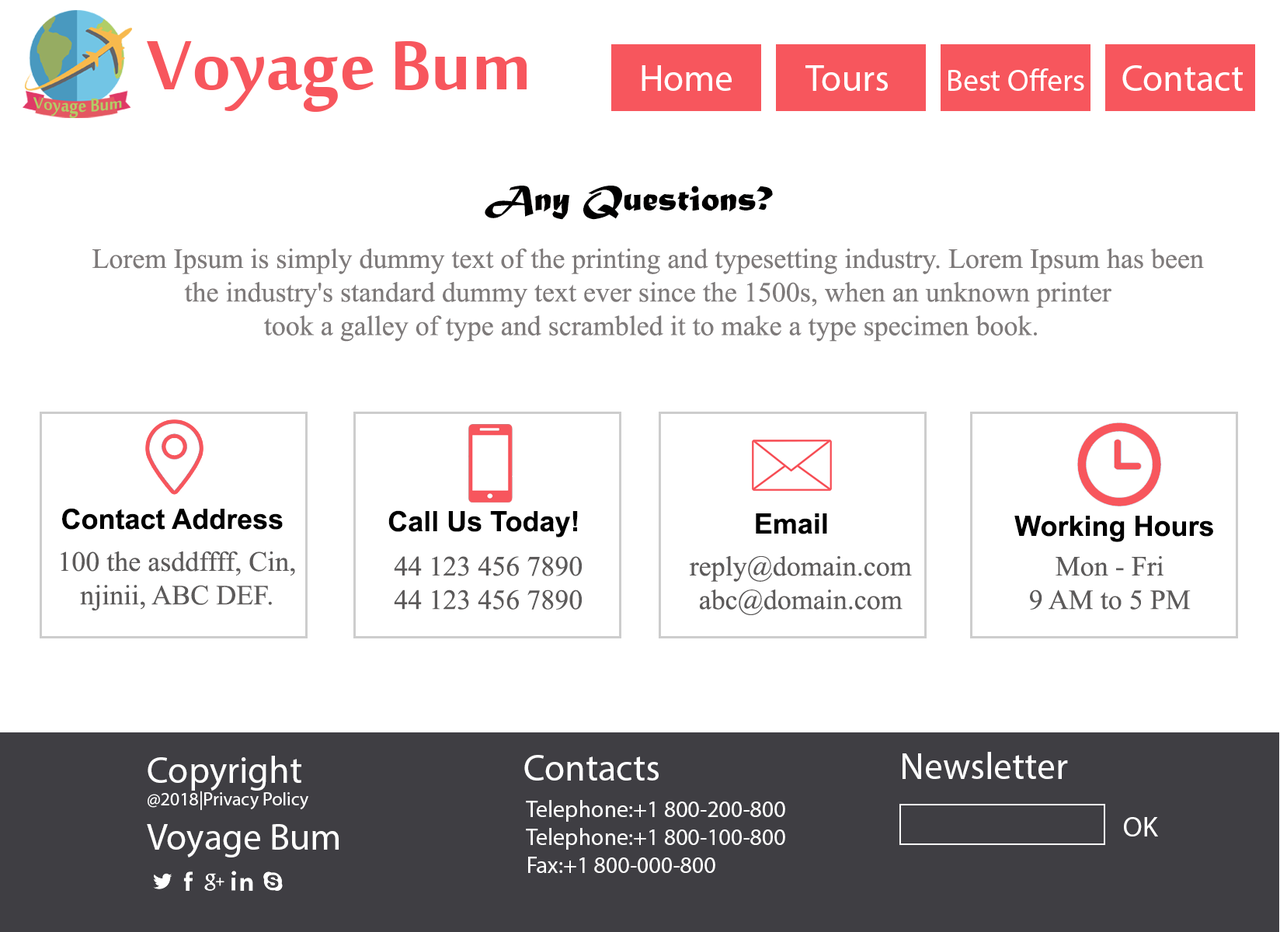
<style>
.page{position:relative;width:1280px;height:932px;background:#ffffff}
.page>*{position:absolute;margin:0}
.t1{font:107.1px "MoolBoran";color:#f7565d}
.t2{font:37.3px "MyriadPro-Regular";color:#ffffff}
.t3{font:31.1px "MyriadPro-Regular";color:#ffffff}
.t4{font:22.6px "MoolBoran";color:#b1cd66;scale:1.14 1}
.t5{font:37.3px "MaturaMTScriptCapitals";color:#010000}
.t6{font:28px "TimesNewRomanPSMT";color:#7e7a7a}
.t7{font:28px "Arial-BoldMT";color:#000000}
.t8{font:28px "TimesNewRomanPSMT";color:#5c5a5a}
.t9{font:18.6px "MyriadPro-Regular";color:#ffffff}
.t10{font:23.3px "MyriadPro-Regular";color:#ffffff}
.t11{font:28px "MyriadPro-Regular";color:#ffffff}
</style>
<div class="page">
<p class="t1" style="left:147px;top:41px;width:379px;height:71px">Voyage Bum</p>
<p class="t2" style="left:641px;top:65px;width:90px;height:26px">Home</p>
<p class="t2" style="left:805px;top:65px;width:83px;height:26px">Tours</p>
<p class="t2" style="left:1122px;top:65px;width:120px;height:26px">Contact</p>
<p class="t3" style="left:948px;top:68px;width:136px;height:23px">Best Offers</p>
<p class="t4" style="left:33px;top:97px;width:89px;height:21px">Voyage Bum</p>
<p class="t5" style="left:485px;top:186px;width:288px;height:34px">Any Questions?</p>
<p class="t6" style="left:92px;top:248px;width:1112px;height:94px;text-align:center">Lorem Ipsum is simply dummy text of the printing and typesetting industry. Lorem Ipsum has been <br>the industry's standard dummy text ever since the 1500s, when an unknown printer <br>took a galley of type and scrambled it to make a type specimen book.</p>
<p class="t7" style="left:62px;top:508px;width:221px;height:22px">Contact Address</p>
<p class="t7" style="left:388px;top:510px;width:190px;height:27px">Call Us Today!</p>
<p class="t7" style="left:756px;top:513px;width:71px;height:21px">Email</p>
<p class="t7" style="left:1014px;top:516px;width:199px;height:26px">Working Hours</p>
<p class="t8" style="left:61px;top:551px;width:234px;height:59px;text-align:center">100 the asddffff, Cin,<br>njinii, ABC DEF.</p>
<p class="t8" style="left:394px;top:556px;width:188px;height:54px;text-align:center">44 123 456 7890<br>44 123 456 7890</p>
<p class="t8" style="left:689px;top:556px;width:223px;height:59px;text-align:center">reply@domain.com<br>abc@domain.com</p>
<p class="t8" style="left:1030px;top:556px;width:160px;height:54px;text-align:center">Mon - Fri<br>9 AM to 5 PM</p>
<p class="t9" style="left:147px;top:756px;width:192px;height:101px"><span class="t2">Copyright<br></span>@2018|Privacy Policy<br><span class="t2">Voyage Bum</span></p>
<p class="t2" style="left:524px;top:755px;width:134px;height:25px">Contacts</p>
<p class="t2" style="left:902px;top:752px;width:166px;height:27px">Newsletter</p>
<p class="t10" style="left:526px;top:800px;width:259px;height:73px">Telephone:+1 800-200-800<br>Telephone:+1 800-100-800<br>Fax:+1 800-000-800</p>
<p class="t11" style="left:1124px;top:817px;width:34px;height:19px">OK</p>
</div>
